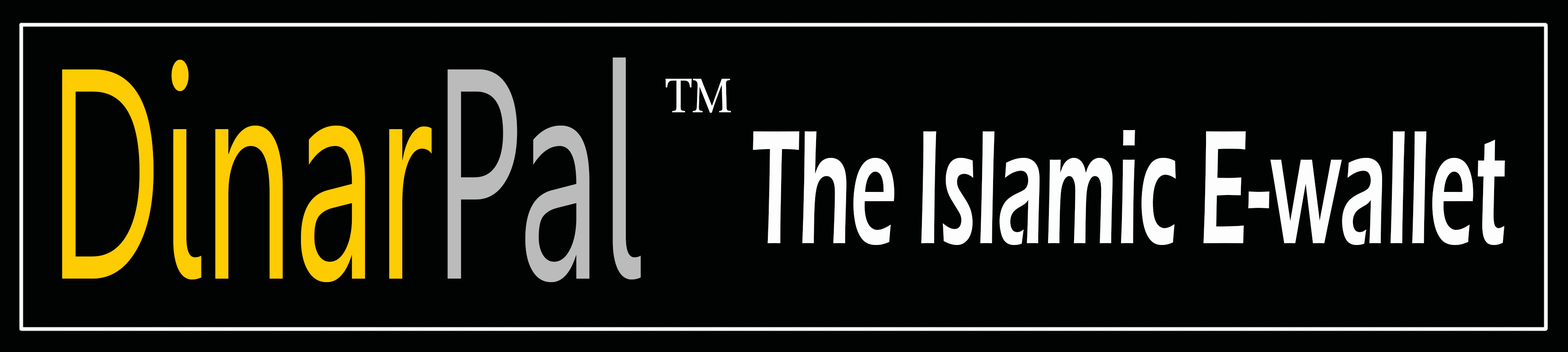
<style>
.page{position:relative;width:1568px;height:352px;background:#010202}
.page>*{position:absolute;margin:0}
.t1{font:299.4px "Gisha";color:#fecc02;scale:0.54 1}
.t2{font:299.4px "Gisha";color:#bbbbbb;scale:0.54 1}
.t3{font:71.8px "MicrosoftUighur";color:#fdfdfd;scale:0.88 1}
.t4{font:168.3px "ErasITC-Demi";color:#fdfdfd;scale:0.48 1}
</style>
<div class="page">
<p class="t1" style="left:62px;top:58px;width:579px;height:224px">Dinar<span class="t2">Pal</span></p>
<p class="t3" style="left:665px;top:79px;width:66px;height:34px">TM</p>
<p class="t4" style="left:753px;top:130px;width:752px;height:115px">The Islamic E-wallet</p>
</div>
